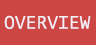
<style>
.page{position:relative;width:96px;height:45px;background:#cc4744}
.page>*{position:absolute;margin:0}
.t1{font:18px "PTMono-Regular";color:#f1f0f9}
</style>
<div class="page">
<p class="t1" style="left:4px;top:15px;width:87px;height:14px">OVERVIEW</p>
</div>
